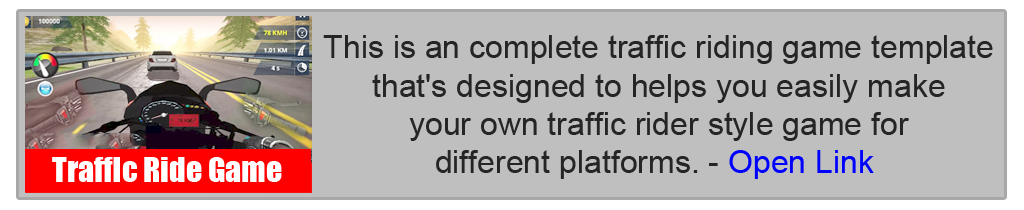
<style>
.page{position:relative;width:1024px;height:210px;background:#bfbfbf}
.page>*{position:absolute;margin:0}
.t1{font:32px "ArialMT";color:#252525}
.t2{font:32px "ArialMT";color:#0000ff}
.t3{font:32px "Impact";color:#ffffff}
</style>
<div class="page">
<p class="t1" style="left:323px;top:35px;width:670px;height:144px;text-align:center">This is an complete traffic riding game template <br>that's designed to helps you easily make <br>your own traffic rider style game for <br>different platforms. - <span class="t2">Open Link</span></p>
<p class="t3" style="left:52px;top:157px;width:230px;height:25px">Traffic Ride Game</p>
</div>
